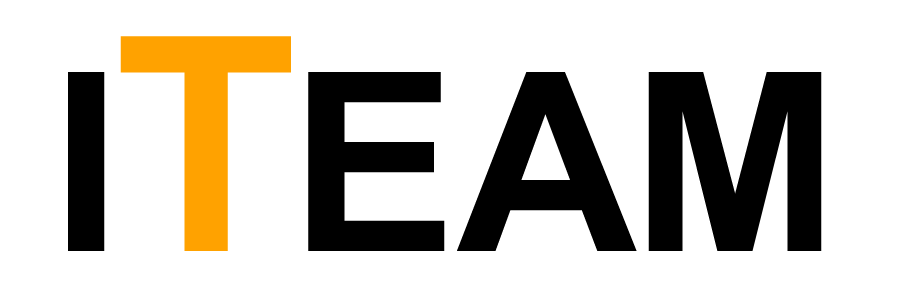
<style>
.page{position:relative;width:900px;height:300px;background:#ffffff}
.page>*{position:absolute;margin:0}
.t1{font:250px "Arial-BoldMT";color:#000000}
.t2{font:300px "Arial-BoldMT";color:#ffa200}
</style>
<div class="page">
<p class="t1" style="left:68px;top:36px;width:754px;height:215px">I<span class="t2">T</span>EAM</p>
</div>
